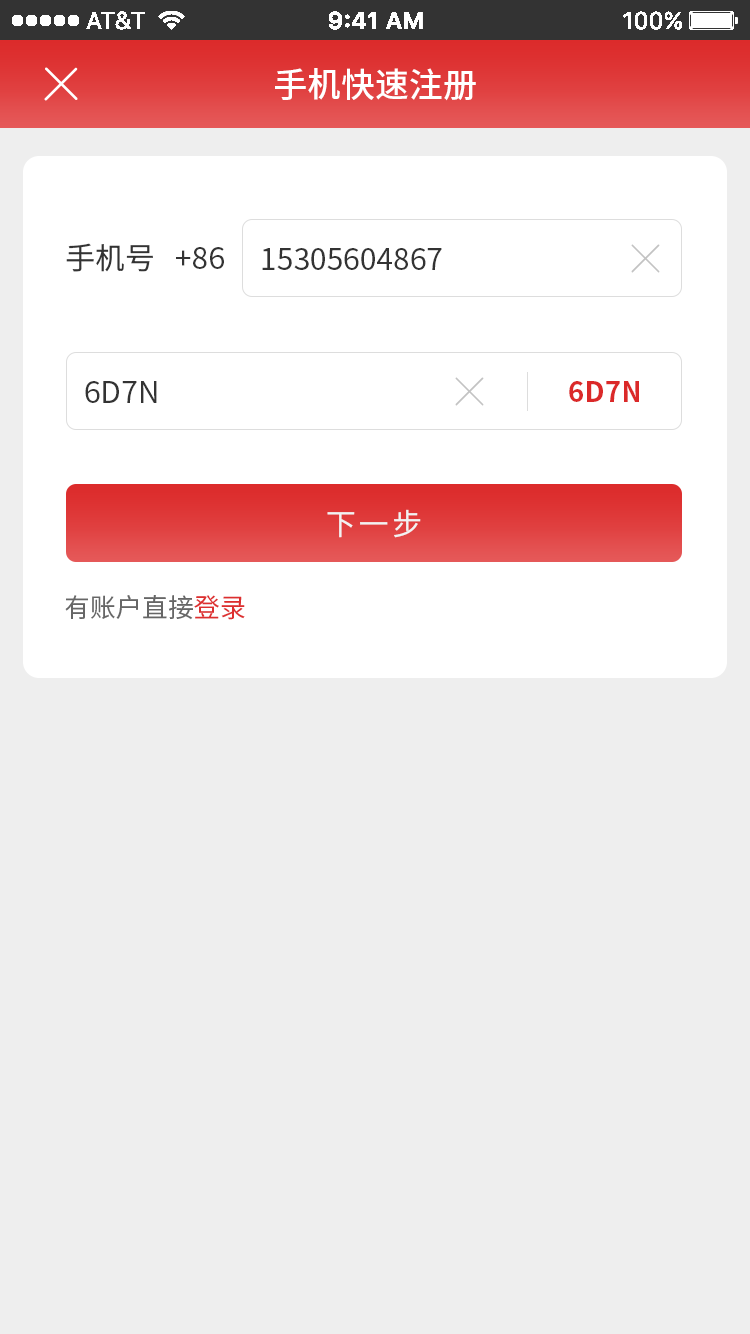
<style>
.page{position:relative;width:750px;height:1334px;background:#eeeeee}
.page>*{position:absolute;margin:0}
.t1{font:34px "SourceHanSansCN-Medium";color:#ffffff}
.t2{font:30px "SourceHanSansCN-Regular";color:#333333}
.t3{font:28px "SourceHanSansCN-Bold";color:#db2929}
.t4{font:30px "SourceHanSansCN-Regular";letter-spacing:0.1em;color:#f2f2f2}
.t5{font:26px "SourceHanSansCN-Regular";color:#666666}
.t6{font:26px "SourceHanSansCN-Regular";color:#dd2f2f}
</style>
<div class="page">
<p class="t1" style="left:275px;top:68px;width:201px;height:33px">手机快速注册</p>
<p class="t2" style="left:66px;top:243px;width:87px;height:29px">手机号</p>
<p class="t2" style="left:176px;top:247px;width:48px;height:22px">+86</p>
<p class="t2" style="left:262px;top:248px;width:180px;height:22px">15305604867</p>
<p class="t2" style="left:85px;top:381px;width:72px;height:22px">6D7N</p>
<p class="t3" style="left:569px;top:381px;width:70px;height:21px">6D7N</p>
<p class="t4" style="left:327px;top:509px;width:94px;height:29px">下一步</p>
<p class="t5" style="left:65px;top:595px;width:180px;height:25px">有账户直接<span class="t6">登录</span></p>
</div>
